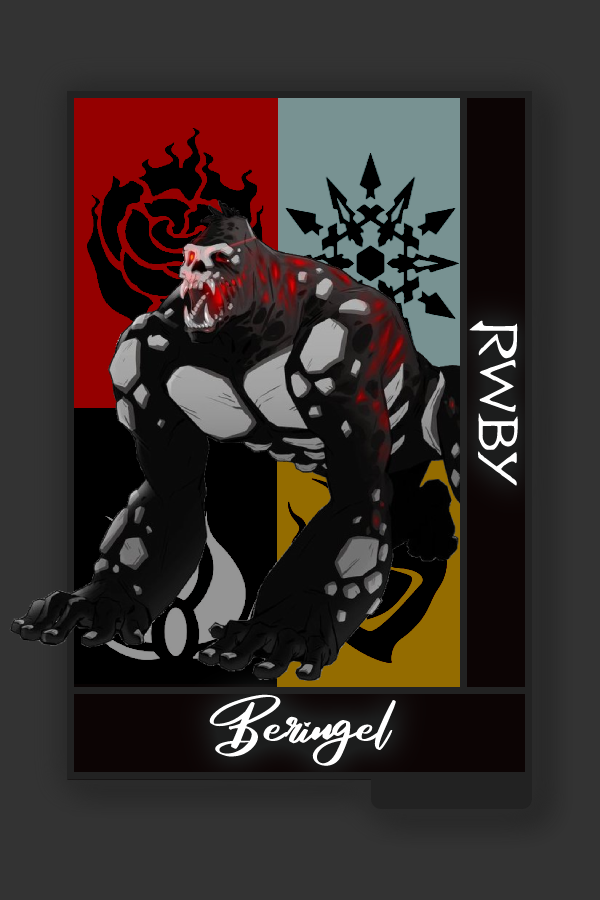
<style>
.page{position:relative;width:600px;height:900px;background:#333333}
.page>*{position:absolute;margin:0}
.t1{font:61.3px "RWBY_Style";color:#ffffff;scale:1.25 1}
.t2{font:75px "RosegaFREE";color:#ffffff}
</style>
<div class="page">
<p class="t1" style="left:469px;top:320px;width:49px;height:166px;rotate:90deg">RWBY</p>
<p class="t2" style="left:207px;top:694px;width:189px;height:78px">Beringel</p>
</div>
